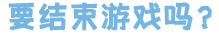
<style>
.page{position:relative;width:219px;height:35px;background:#ffffff}
.page>*{position:absolute;margin:0}
.t1{font:30.6px "shetumodengxiaofangti";color:#73b5e4;font-weight:bold}
</style>
<div class="page">
<p class="t1" style="left:8px;top:2px;width:204px;height:29px">要结束游戏吗？</p>
</div>
